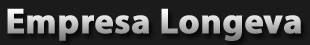
<style>
.page{position:relative;width:310px;height:45px;background:#1b1b1b}
.page>*{position:absolute;margin:0}
.t1{font:36px "MyriadHebrew-Bold";font-weight:bold}
</style>
<div class="page">
<p class="t1" style="left:7px;top:8px;width:294px;height:33px">Empresa Longeva</p>
</div>
